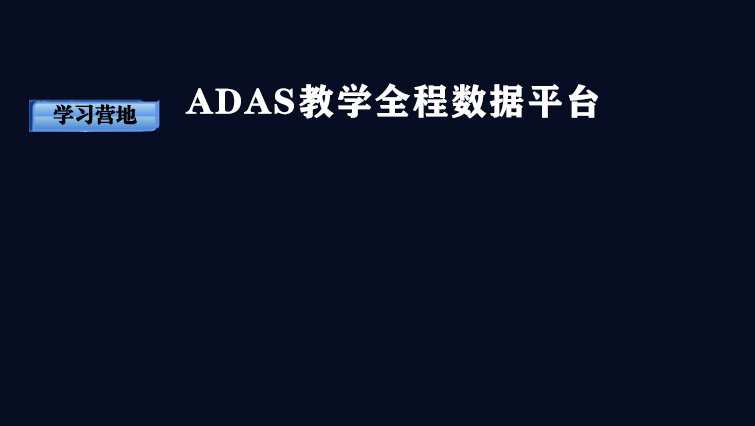
<style>
.page{position:relative;width:755px;height:426px;background:#070d23}
.page>*{position:absolute;margin:0}
.t1{font:36px "FZCHSJW--GB1-0";letter-spacing:0.06em;color:#ffffff}
</style>
<div class="page">
<p class="t1" style="left:185px;top:83px;width:413px;height:36px">ADAS教学全程数据平台</p>
</div>
